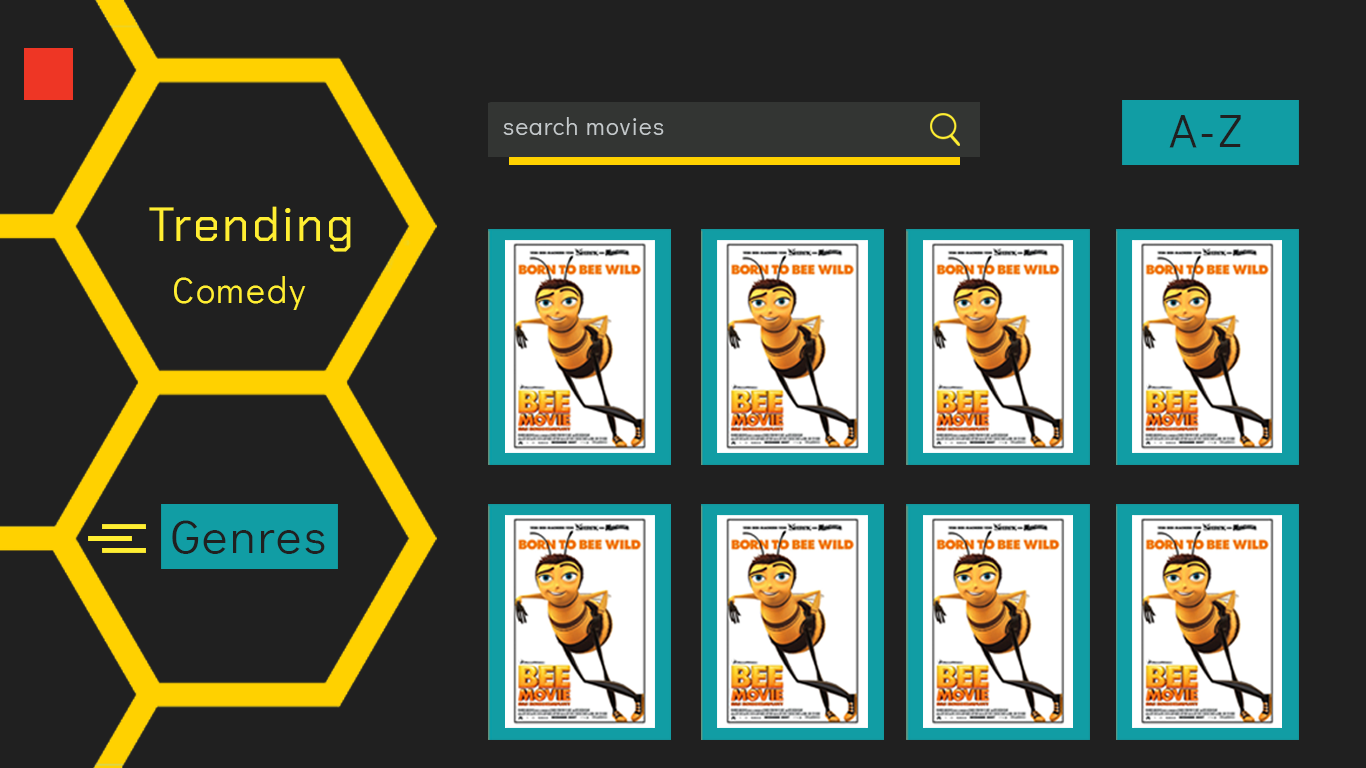
<style>
.page{position:relative;width:1366px;height:768px;background:#202020}
.page>*{position:absolute;margin:0}
.t1{font:24px "DidactGothic-Regular";letter-spacing:0.05em;color:#c4c9cb}
.t2{font:48px "DidactGothic-Regular";letter-spacing:0.05em;color:#202020}
.t3{font:48px "ChakraPetch-Regular";letter-spacing:0.05em;color:#ffee32}
.t4{font:36px "DidactGothic-Regular";letter-spacing:0.05em;color:#ffee32}
</style>
<div class="page">
<p class="t1" style="left:503px;top:117px;width:161px;height:18px">search movies</p>
<p class="t2" style="left:1169px;top:115px;width:72px;height:33px">A-Z</p>
<p class="t3" style="left:149px;top:206px;width:202px;height:46px">Trending</p>
<p class="t4" style="left:174px;top:276px;width:132px;height:34px">Comedy</p>
<p class="t2" style="left:172px;top:520px;width:153px;height:34px">Genres</p>
</div>
